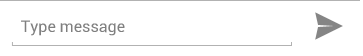
<style>
.page{position:relative;width:363px;height:56px;background:#ffffff}
.page>*{position:absolute;margin:0}
.t1{font:16px "Roboto-Regular";color:#7f7f7f}
</style>
<div class="page">
<p class="t1" style="left:21px;top:20px;width:104px;height:16px">Type message</p>
</div>
